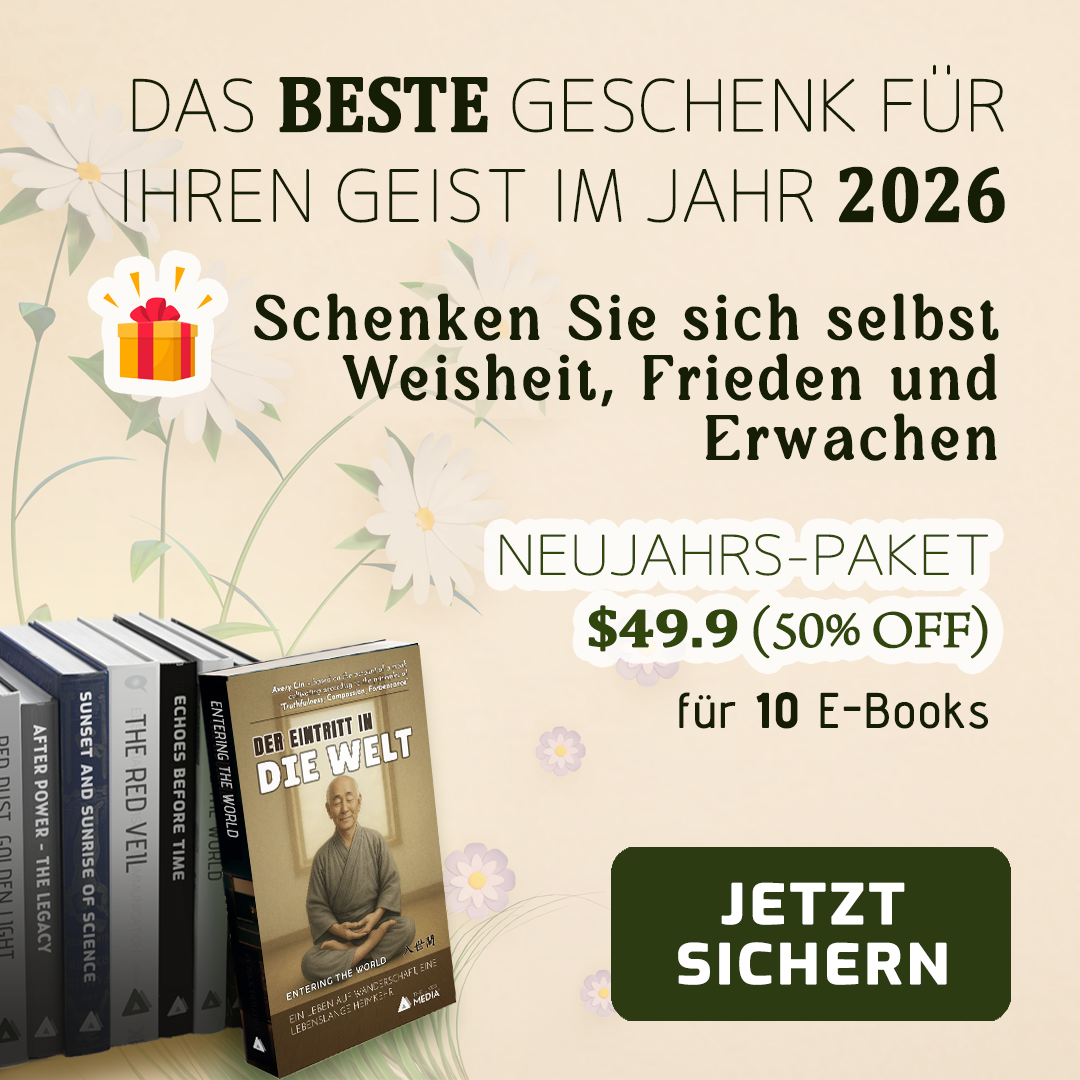
<style>
.page{position:relative;width:1080px;height:1080px}
.page>*{position:absolute;margin:0}
.t1{font:70.4px/90.2px "Chogokuboso-Gothic";letter-spacing:-0.01em;color:#151e05;font-weight:bold}
.t2{font:79.2px/90.2px "Cambria-Bold";letter-spacing:-0.01em;color:#151e05;font-weight:bold;scale:0.89 1}
.t3{font:60px/60px "AmadiBlurDemo-Regular";letter-spacing:0.075em;color:#151e05;font-weight:bold}
.t4{font:60px/60px "MyriadPro-Regular";letter-spacing:0.075em;color:#151e05;font-weight:bold}
.t5{font:54px/72px "Chogokuboso-Gothic";letter-spacing:-0.025em;color:#31460c;font-weight:bold;scale:1.11 1}
.t6{font:54px/72px "Cambria-Bold";letter-spacing:-0.025em;color:#31460c;font-weight:bold;scale:1.11 1}
.t7{font:54px/72px "ArnoPro-LightDisplay";letter-spacing:-0.025em;color:#31460c;font-weight:bold;scale:1.11 1}
.t8{font:48px "AdventPro-Regular";letter-spacing:0.05em;color:#151e05;font-weight:bold}
.t9{font:48px "AdventPro-Bold";letter-spacing:0.05em;color:#151e05;font-weight:bold}
.t10{font:54px/60px "Exo-Bold";letter-spacing:0.05em;color:#ffffff;font-weight:bold;scale:1.11 1}
</style>
<div class="page">
<p class="t1" style="left:124px;top:64px;width:881px;height:159px;text-align:right">DAS <span class="t2">BESTE</span> GESCHENK FÜR IHREN GEIST IM JAHR <span class="t2">2026</span></p>
<p class="t3" style="left:254px;top:293px;width:745px;height:168px;text-align:right">Schenken Sie sich selbst Weisheit<span class="t4">,</span> Frieden und Erwachen</p>
<p class="t5" style="left:500px;top:534px;width:488px;height:125px;text-align:right">NEUJAHRS-PAKET <span class="t6">$49.9</span><span class="t7"> (50% OFF)</span></p>
<p class="t8" style="left:679px;top:692px;width:309px;height:37px">für <span class="t9">10</span> E-Books</p>
<p class="t10" style="left:678px;top:882px;width:269px;height:103px;text-align:center">JETZT SICHERN</p>
</div>
